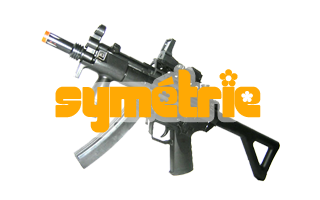
<style>
.page{position:relative;width:320px;height:200px;background:#ffffff}
.page>*{position:absolute;margin:0}
.t1{font:60px "Chick";color:#ffa904}
</style>
<div class="page">
<p class="t1" style="left:55px;top:69px;width:206px;height:64px">symétrie</p>
</div>
